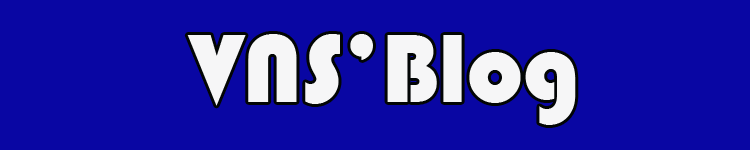
<style>
.page{position:relative;width:750px;height:150px;background:#0906a3}
.page>*{position:absolute;margin:0}
.t1{font:100px "Bauhaus93";color:#f6f6f7}
</style>
<div class="page">
<p class="t1" style="left:187px;top:34px;width:389px;height:91px">VNS’Blog</p>
</div>
